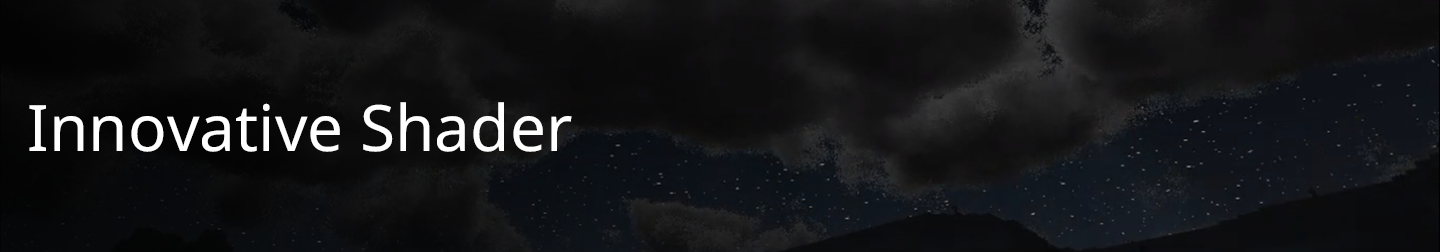
<style>
.page{position:relative;width:1440px;height:252px}
.page>*{position:absolute;margin:0}
.t1{font:64px "NotoSans-Regular";color:#ffffff}
</style>
<div class="page">
<p class="t1" style="left:29px;top:102px;width:543px;height:50px">Innovative Shader</p>
</div>
